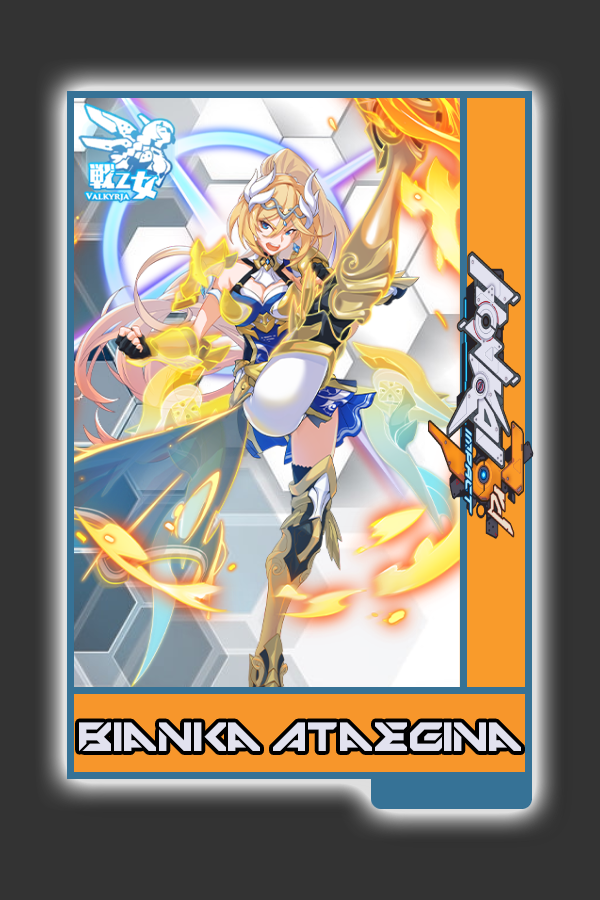
<style>
.page{position:relative;width:600px;height:900px;background:#333333}
.page>*{position:absolute;margin:0}
.t1{font:28.5px "Mechsuit";color:#e2e2ef}
</style>
<div class="page">
<p class="t1" style="left:79px;top:722px;width:442px;height:29px">Bianka Ataegina</p>
</div>
